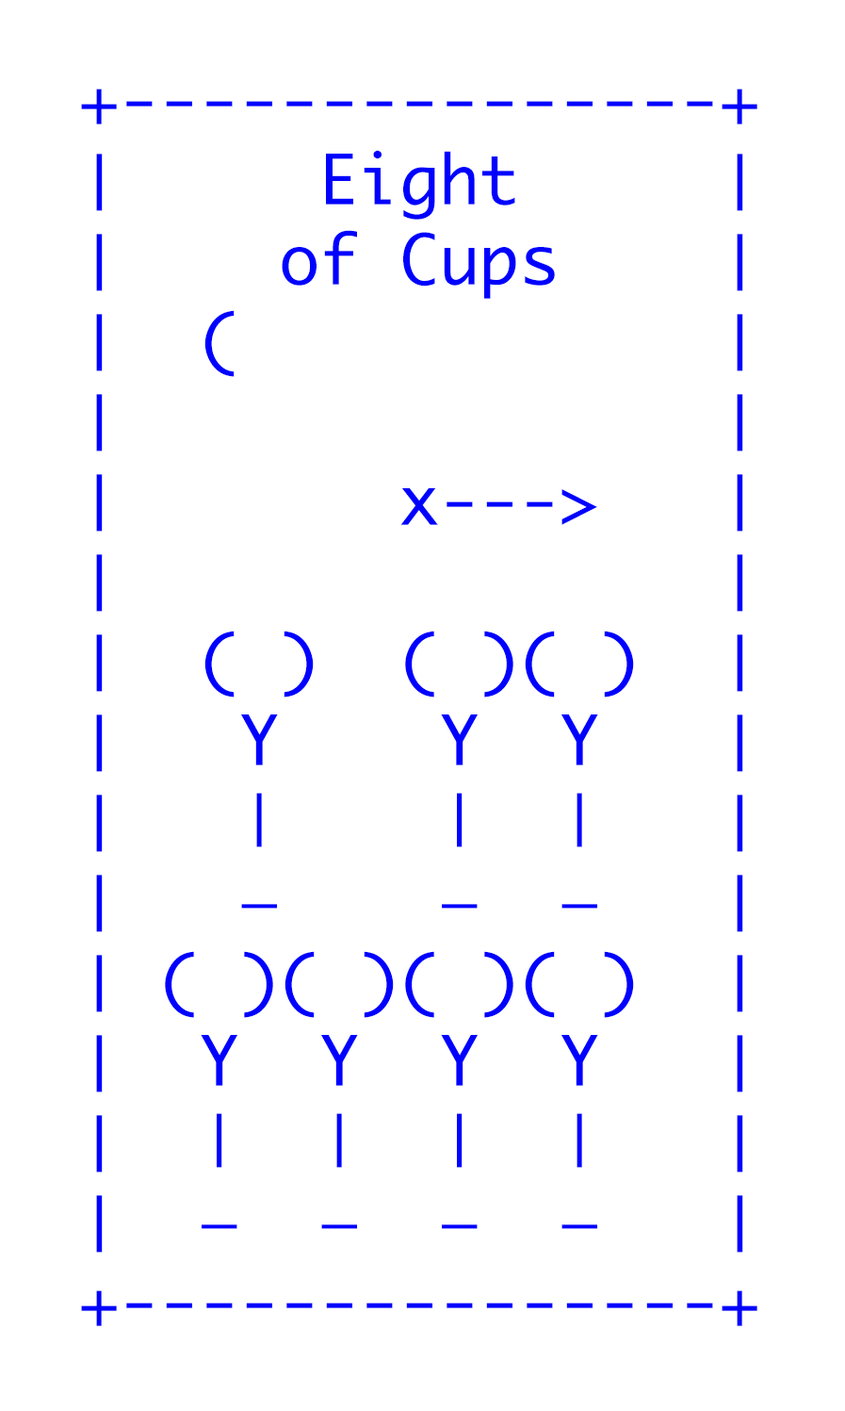
<style>
.page{position:relative;width:845px;height:1411px;background:#ffffff}
.page>*{position:absolute;margin:0}
.t1{font:66.7px "Monaco";color:#0000ff}
</style>
<div class="page">
<p class="t1" style="left:81px;top:89px;width:677px;height:1237px">+---------------+<br>│     Eight     │<br>│    of Cups    │<br>│  (            │<br>│               │<br>│       x---&gt;   │<br>│               │<br>│  ( )  ( )( )  │ <br>│   Y    Y  Y   │<br>│   |    |  |   │ <br>│   —    —  —   │<br>│ ( )( )( )( )  │ <br>│  Y  Y  Y  Y   │<br>│  |  |  |  |   │ <br>│  —  —  —  —   │<br>+---------------+</p>
</div>
